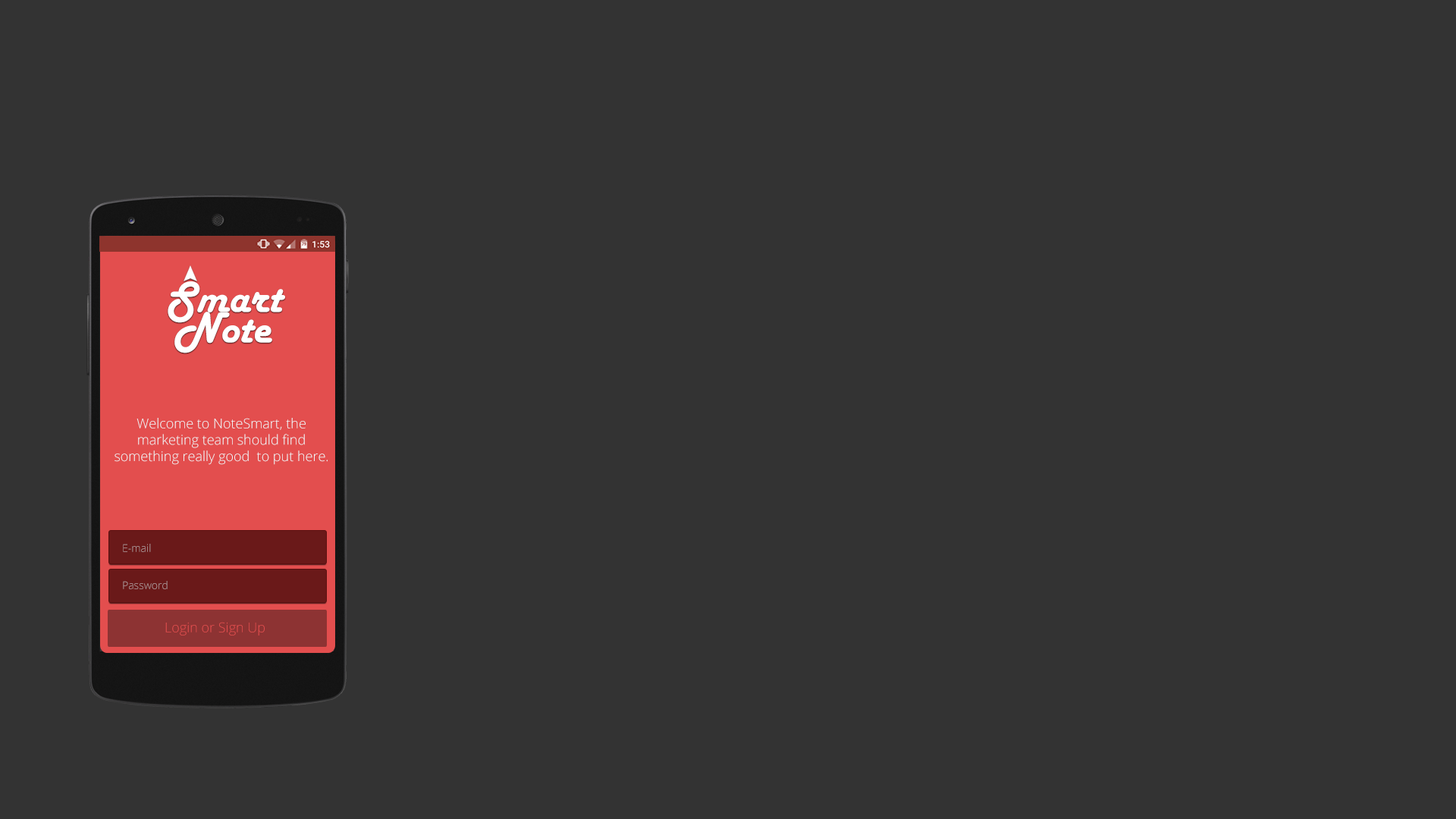
<style>
.page{position:relative;width:1456px;height:819px;background:#333333}
.page>*{position:absolute;margin:0}
.t1{font:45.5px "HarlowSolid";color:#ffffff}
.t2{font:13.6px "OpenSans-Light";color:#f0f5f7}
.t3{font:10.6px "OpenSans-Light"}
.t4{font:13.6px "OpenSans-Light";color:#e34e4e}
</style>
<div class="page">
<p class="t1" style="left:168px;top:281px;width:117px;height:42px">Smart</p>
<p class="t1" style="left:174px;top:312px;width:98px;height:41px">Note</p>
<p class="t2" style="left:115px;top:418px;width:213px;height:47px;text-align:center">Welcome to NoteSmart, the      marketing team should find    something really good  to put here.</p>
<p class="t3" style="left:123px;top:544px;width:28px;height:8px">E-mail</p>
<p class="t3" style="left:123px;top:581px;width:45px;height:8px">Password</p>
<p class="t4" style="left:165px;top:622px;width:100px;height:13px">Login or Sign Up</p>
</div>
